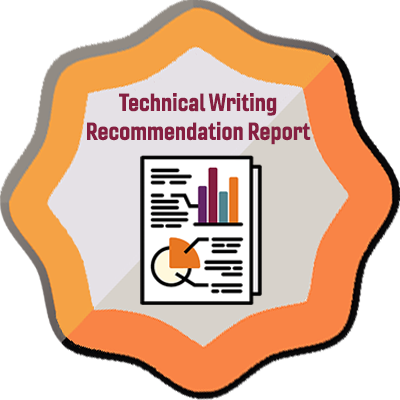
<style>
.page{position:relative;width:400px;height:400px;background:#ffffff}
.page>*{position:absolute;margin:0}
.t1{font:24px "Gineso-ConBol";color:#861f41}
</style>
<div class="page">
<p class="t1" style="left:87px;top:93px;width:224px;height:52px;text-align:center">Technical Writing<br>Recommendation Report</p>
</div>
